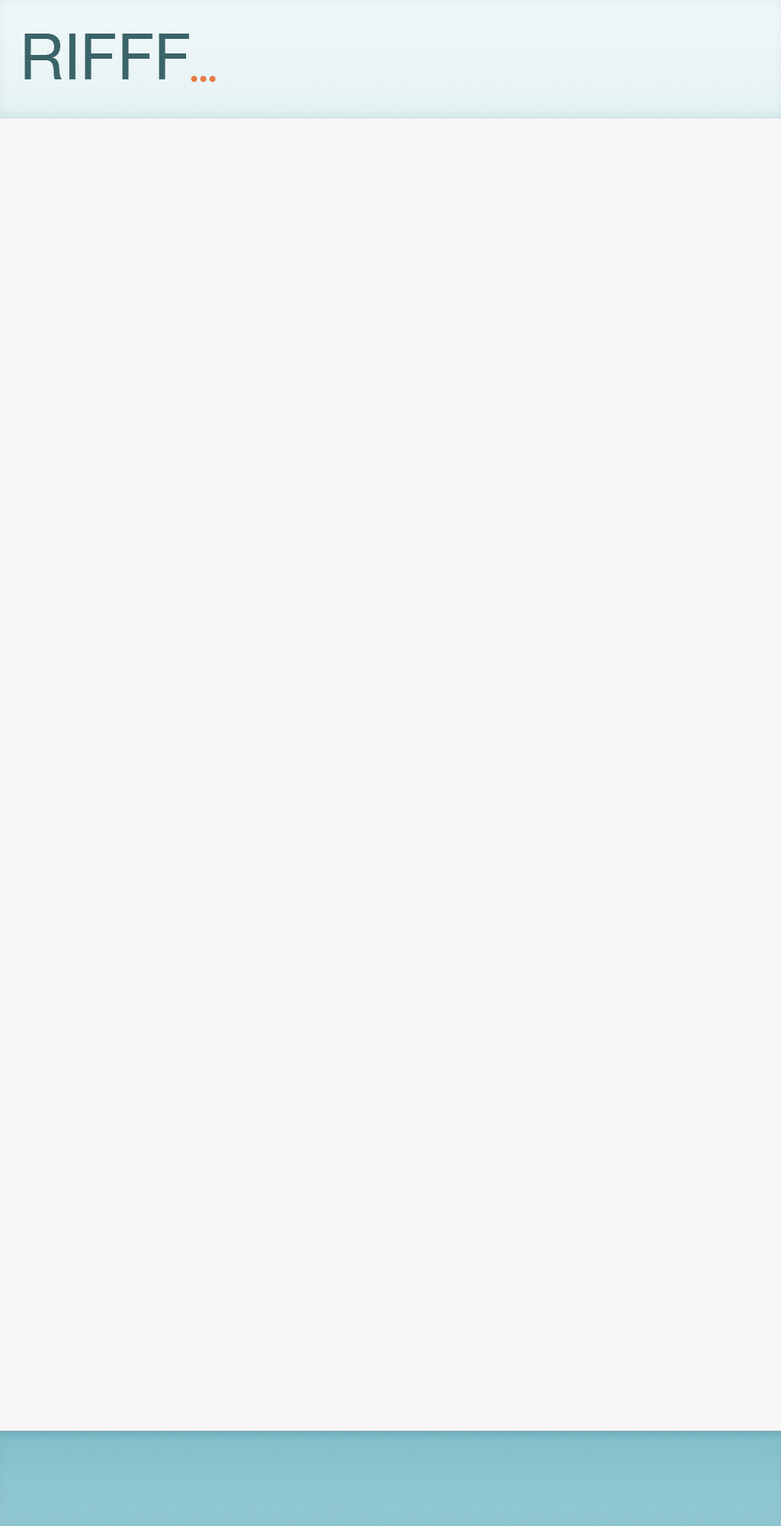
<style>
.page{position:relative;width:781px;height:1526px;background:#f7f7f7}
.page>*{position:absolute;margin:0}
.t1{font:64.1px "HelveticaNeue";color:#3a6469}
</style>
<div class="page">
<p class="t1" style="left:24px;top:34px;width:165px;height:45px">RIFFF</p>
</div>
